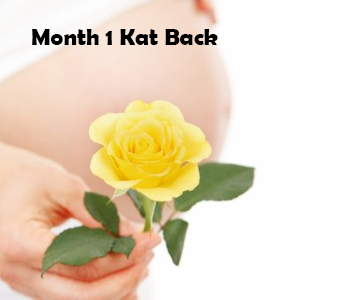
<style>
.page{position:relative;width:350px;height:300px}
.page>*{position:absolute;margin:0}
.t1{font:24px "BerlinSansFBDemi-Bold";color:#000000}
</style>
<div class="page">
<p class="t1" style="left:32px;top:29px;width:186px;height:16px">Month 1 Kat Back</p>
</div>
